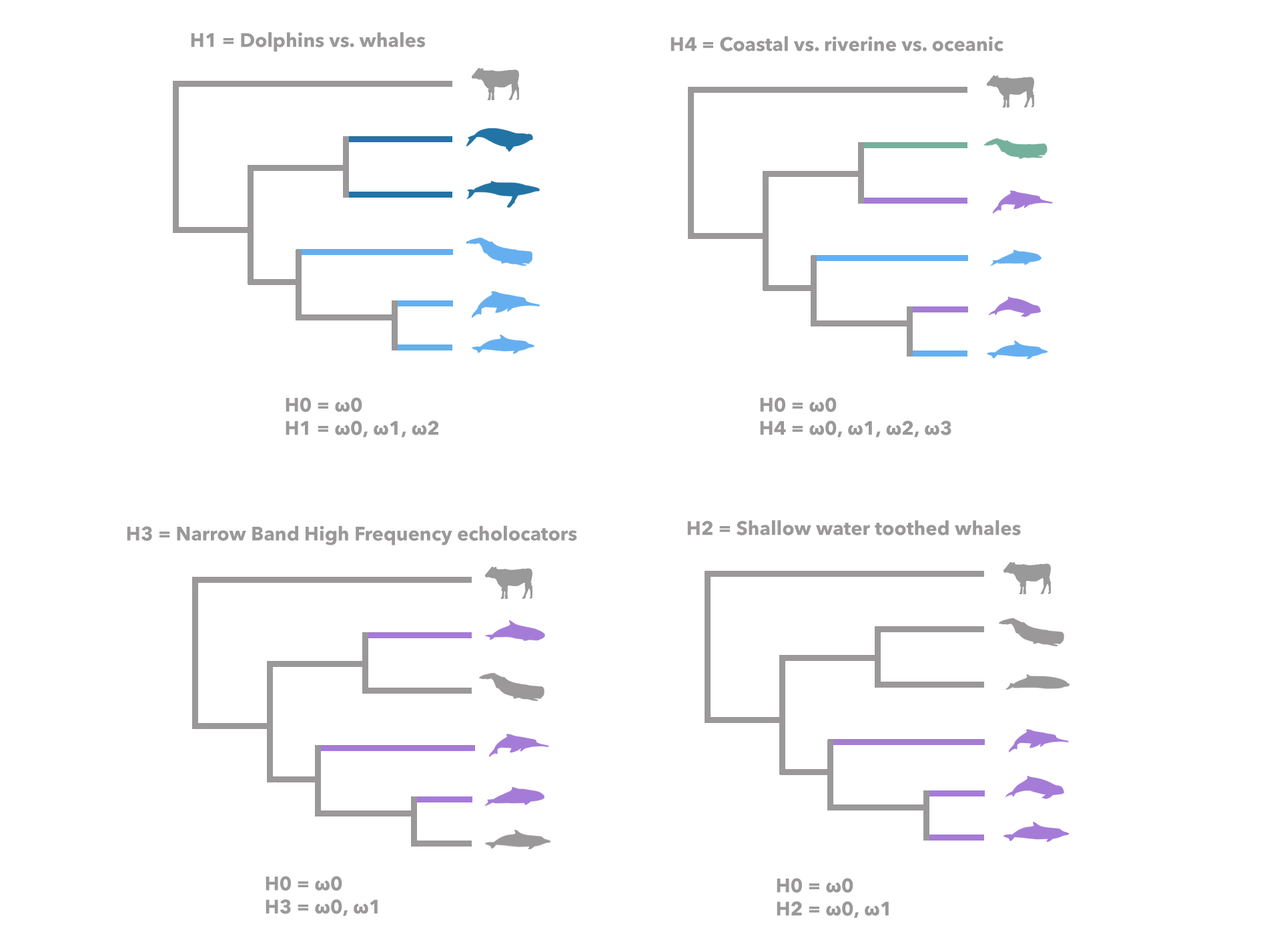
<style>
.page{position:relative;width:1261px;height:946px;background:#ffffff}
.page>*{position:absolute;margin:0}
.t1{font:19.4px "AvenirNext-Bold";color:#9a9898}
</style>
<div class="page">
<p class="t1" style="left:191px;top:32px;width:235px;height:20px">H1 = Dolphins vs. whales</p>
<p class="t1" style="left:671px;top:36px;width:333px;height:15px">H4 = Coastal vs. riverine vs. oceanic</p>
<p class="t1" style="left:286px;top:397px;width:152px;height:40px">H0 = ω0<br>H1 = ω0, ω1, ω2</p>
<p class="t1" style="left:760px;top:397px;width:192px;height:40px">H0 = ω0<br>H4 = ω0, ω1, ω2, ω3</p>
<p class="t1" style="left:687px;top:520px;width:334px;height:15px">H2 = Shallow water toothed whales</p>
<p class="t1" style="left:127px;top:525px;width:450px;height:20px">H3 = Narrow Band High Frequency echolocators</p>
<p class="t1" style="left:266px;top:875px;width:112px;height:40px">H0 = ω0<br>H3 = ω0, ω1</p>
<p class="t1" style="left:777px;top:877px;width:112px;height:40px">H0 = ω0<br>H2 = ω0, ω1</p>
</div>
